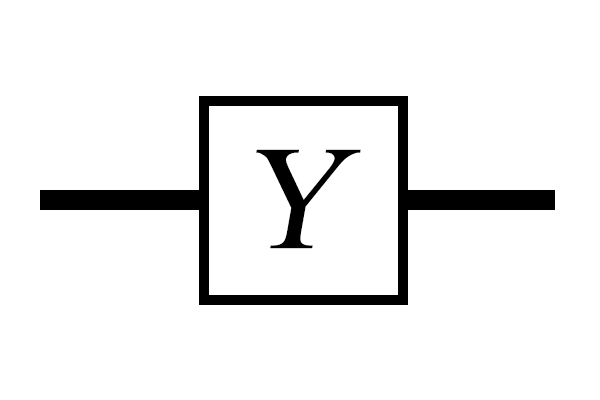
<style>
.page{position:relative;width:600px;height:400px;background:#ffffff}
.page>*{position:absolute;margin:0}
.t1{font:148.5px "TimesNewRomanPSMT";color:#000000;font-style:italic}
</style>
<div class="page">
<p class="t1" style="left:256px;top:149px;width:105px;height:100px">Y</p>
</div>
